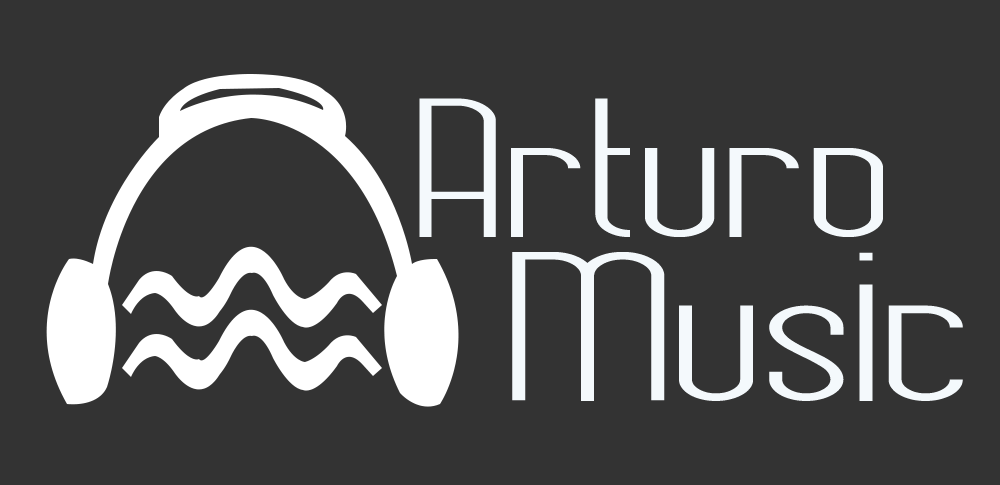
<style>
.page{position:relative;width:1000px;height:485px;background:#333333}
.page>*{position:absolute;margin:0}
.t1{font:197.7px "Chase";letter-spacing:-0.025em;color:#f4f9fc;scale:1.72 1}
.t2{font:211.5px "Chase";letter-spacing:-0.025em;color:#f4f9fc;scale:1.72 1}
</style>
<div class="page">
<p class="t1" style="left:419px;top:98px;width:464px;height:139px">Arturo</p>
<p class="t2" style="left:512px;top:252px;width:451px;height:149px">Music</p>
</div>
